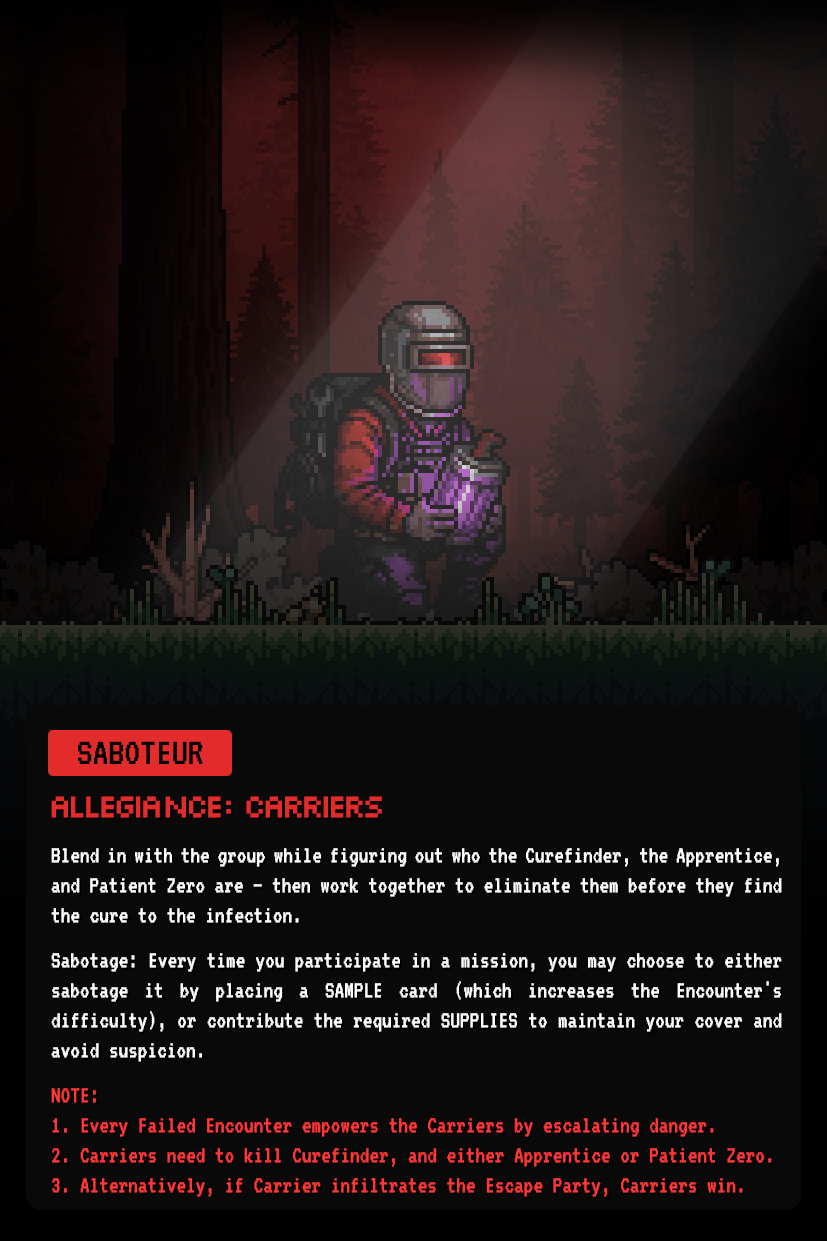
<style>
.page{position:relative;width:827px;height:1241px;background:#090909}
.page>*{position:absolute;margin:0}
.t1{font:39.7px "VT323-Regular";color:#000000}
.t2{font:25px "VT323-Regular";color:#ffffff;scale:0.96 1}
.t3{font:33.3px "Silkscreen-Regular";letter-spacing:-0.05em;color:#e22b2b;scale:0.96 1}
.t4{font:25px "VT323-Regular";color:#ff3737;scale:0.96 1}
</style>
<div class="page">
<p class="t1" style="left:78px;top:741px;width:125px;height:23px">SABOTEUR</p>
<p class="t2" style="left:51px;top:796px;width:731px;height:401px;text-align:justify"><span class="t3">allegiancE: CARRIERS<br><br></span>Blend in with the group while figuring out who the Curefinder, the Apprentice, and Patient Zero are — then work together to eliminate them before they find the cure to the infection.<br><br>Sabotage: Every time you participate in a mission, you may choose to either sabotage it by placing a SAMPLE card (which increases the Encounter's difficulty), or contribute the required SUPPLIES to maintain your cover and avoid suspicion.<br><br><span class="t4">NOTE:<br>1. Every Failed Encounter empowers the Carriers by escalating danger.<br>2. Carriers need to kill Curefinder, and either Apprentice or Patient Zero.<br>3. Alternatively, if Carrier infiltrates the Escape Party, Carriers win.</span></p>
</div>
